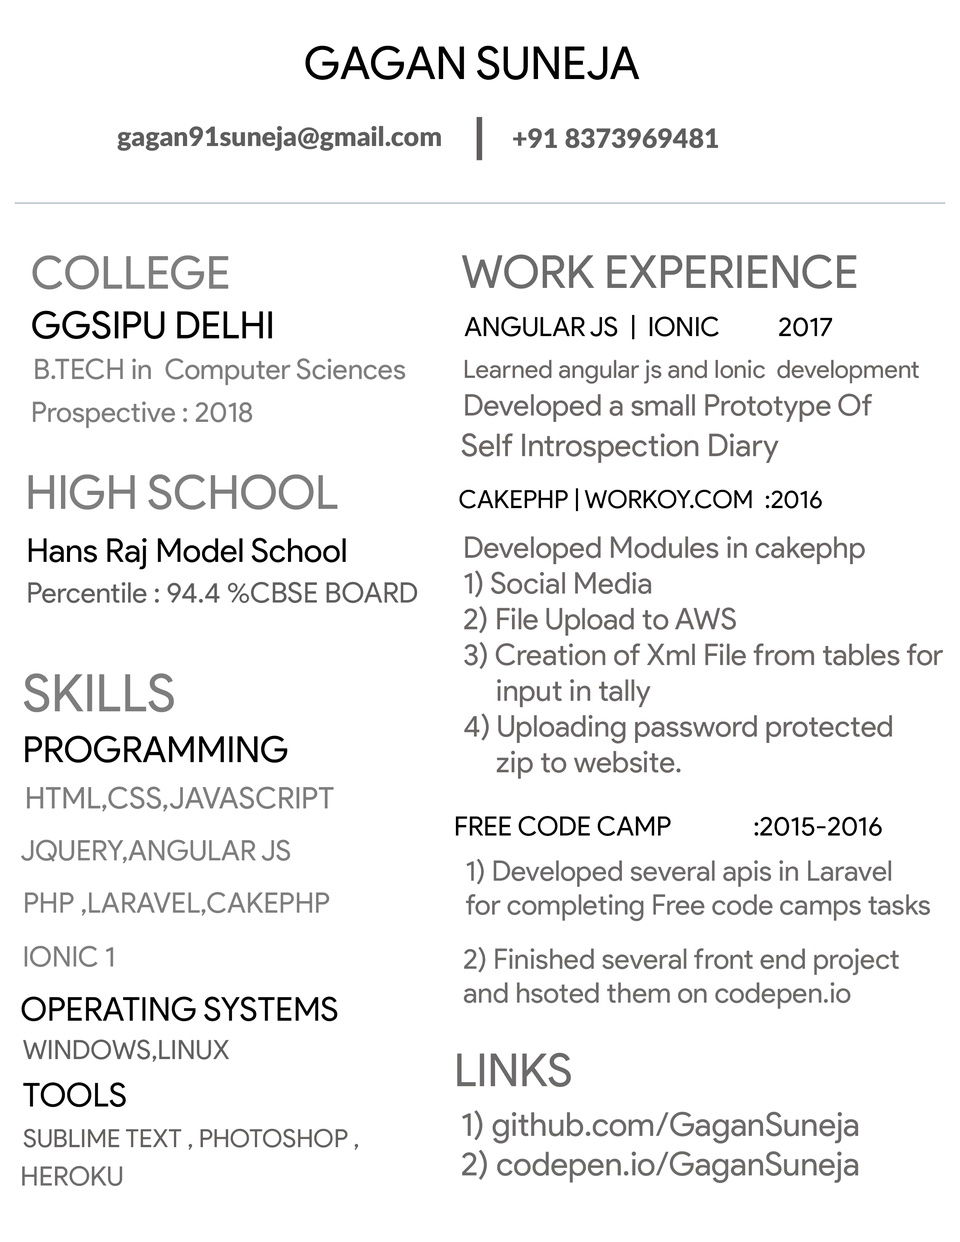
<style>
.page{position:relative;width:960px;height:1242px;background:#ffffff}
.page>*{position:absolute;margin:0}
.t1{font:45.5px "ProductSans-Regular";color:#000000}
.t2{font:26.7px "Lato-Black";color:#5f5e5e}
.t3{font:45.5px "Lato-Black";color:#615d5d}
.t4{font:45.5px "ProductSans-Regular";color:#7e7e7e}
.t5{font:45.5px "ProductSans-Regular";color:#6c6b6b}
.t6{font:37.7px "ProductSans-Regular";color:#010101}
.t7{font:26.7px "ProductSans-Regular";color:#000000}
.t8{font:28.2px "ProductSans-Regular";color:#7e7e7e}
.t9{font:25.1px "ProductSans-Regular";color:#6c6666}
.t10{font:29.8px "ProductSans-Regular";color:#6c6666}
.t11{font:31.4px "ProductSans-Regular";color:#6c6666}
.t12{font:47.1px "ProductSans-Regular";color:#7e7e7e}
.t13{font:25.1px "ProductSans-Regular";color:#000000}
.t14{font:33px "ProductSans-Regular";color:#010101}
.t15{font:28.2px "ProductSans-Regular";color:#605e5e}
.t16{font:51.8px "ProductSans-Regular";color:#7e7e7e}
.t17{font:36.1px "ProductSans-Regular";color:#000000}
.t18{font:29.8px "ProductSans-Regular";color:#7e7e7e}
.t19{font:28.2px "ProductSans-Regular";color:#6d6a6a}
.t20{font:33px "ProductSans-Regular";color:#000000}
.t21{font:26.7px "ProductSans-Regular";color:#626060}
.t22{font:45.5px "ProductSans-Regular";color:#6d6a6a}
.t23{font:33px "ProductSans-Regular";color:#6d6a6a}
.t24{font:25.1px "ProductSans-Regular";color:#656161}
.t25{font:26.7px "ProductSans-Regular";color:#6f6c6c}
</style>
<div class="page">
<p class="t1" style="left:305px;top:46px;width:335px;height:34px">GAGAN SUNEJA</p>
<p class="t2" style="left:117px;top:126px;width:324px;height:25px">gagan91suneja@gmail.com</p>
<p class="t3" style="left:477px;top:117px;width:5px;height:43px">|</p>
<p class="t2" style="left:513px;top:128px;width:205px;height:20px">+91 8373969481</p>
<p class="t4" style="left:32px;top:255px;width:196px;height:34px">COLLEGE</p>
<p class="t5" style="left:462px;top:254px;width:394px;height:35px">WORK EXPERIENCE</p>
<p class="t6" style="left:32px;top:311px;width:240px;height:28px">GGSIPU DELHI</p>
<p class="t7" style="left:465px;top:315px;width:367px;height:25px">ANGULAR JS  |  IONIC          2017</p>
<p class="t8" style="left:35px;top:358px;width:370px;height:27px">B.TECH in  Computer Sciences</p>
<p class="t9" style="left:465px;top:359px;width:454px;height:25px">Learned angular js and Ionic  development</p>
<p class="t8" style="left:33px;top:401px;width:219px;height:27px">Prospective : 2018</p>
<p class="t10" style="left:465px;top:394px;width:407px;height:28px">Developed a small Prototype Of</p>
<p class="t11" style="left:462px;top:433px;width:317px;height:30px">Self Introspection Diary</p>
<p class="t12" style="left:29px;top:474px;width:309px;height:36px">HIGH SCHOOL</p>
<p class="t13" style="left:459px;top:488px;width:363px;height:23px">CAKEPHP | WORKOY.COM  :2016</p>
<p class="t14" style="left:29px;top:538px;width:317px;height:32px">Hans Raj Model School</p>
<p class="t10" style="left:464px;top:536px;width:479px;height:243px">Developed Modules in cakephp<br>1) Social Media<br>2) File Upload to AWS<br>3) Creation of Xml File from tables for<br>     input in tally<br>4) Uploading password protected <br>     zip to website.</p>
<p class="t15" style="left:28px;top:582px;width:389px;height:21px">Percentile : 94.4 %CBSE BOARD</p>
<p class="t16" style="left:24px;top:673px;width:150px;height:40px">SKILLS</p>
<p class="t17" style="left:25px;top:736px;width:262px;height:27px">PROGRAMMING</p>
<p class="t18" style="left:27px;top:787px;width:307px;height:25px">HTML,CSS,JAVASCRIPT</p>
<p class="t7" style="left:456px;top:816px;width:426px;height:20px">FREE CODE CAMP              :2015-2016</p>
<p class="t8" style="left:21px;top:840px;width:269px;height:24px">JQUERY,ANGULAR JS</p>
<p class="t19" style="left:466px;top:859px;width:464px;height:63px">1) Developed several apis in Laravel<br>for completing Free code camps tasks</p>
<p class="t8" style="left:25px;top:892px;width:304px;height:24px">PHP ,LARAVEL,CAKEPHP</p>
<p class="t8" style="left:24px;top:946px;width:89px;height:21px">IONIC 1</p>
<p class="t19" style="left:464px;top:947px;width:435px;height:62px">2) Finished several front end project<br>and hsoted them on codepen.io</p>
<p class="t20" style="left:21px;top:997px;width:316px;height:25px">OPERATING SYSTEMS</p>
<p class="t21" style="left:23px;top:1040px;width:206px;height:22px">WINDOWS,LINUX</p>
<p class="t22" style="left:457px;top:1053px;width:114px;height:34px">LINKS</p>
<p class="t20" style="left:23px;top:1083px;width:103px;height:24px">TOOLS</p>
<p class="t23" style="left:462px;top:1110px;width:396px;height:74px">1) github.com/GaganSuneja<br>2) codepen.io/GaganSuneja</p>
<p class="t24" style="left:23px;top:1129px;width:335px;height:21px">SUBLIME TEXT , PHOTOSHOP ,</p>
<p class="t25" style="left:22px;top:1166px;width:100px;height:21px">HEROKU</p>
</div>
